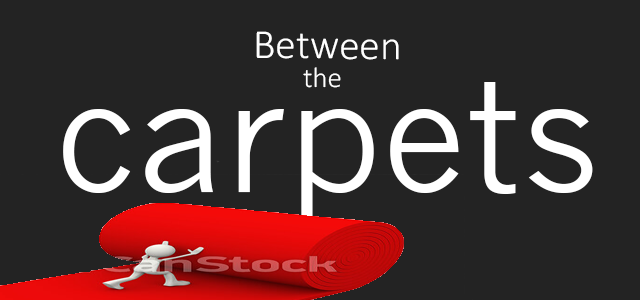
<style>
.page{position:relative;width:640px;height:300px;background:#232323}
.page>*{position:absolute;margin:0}
.t1{font:41.7px "Calibri-Light";color:#ffffff}
.t2{font:28.7px "Calibri-Light";color:#ffffff}
.t3{font:154px "NewsGothicMT";color:#ffffff}
</style>
<div class="page">
<p class="t1" style="left:256px;top:31px;width:143px;height:29px">Between</p>
<p class="t2" style="left:303px;top:67px;width:38px;height:21px">the</p>
<p class="t3" style="left:63px;top:82px;width:530px;height:141px">carpets</p>
</div>
